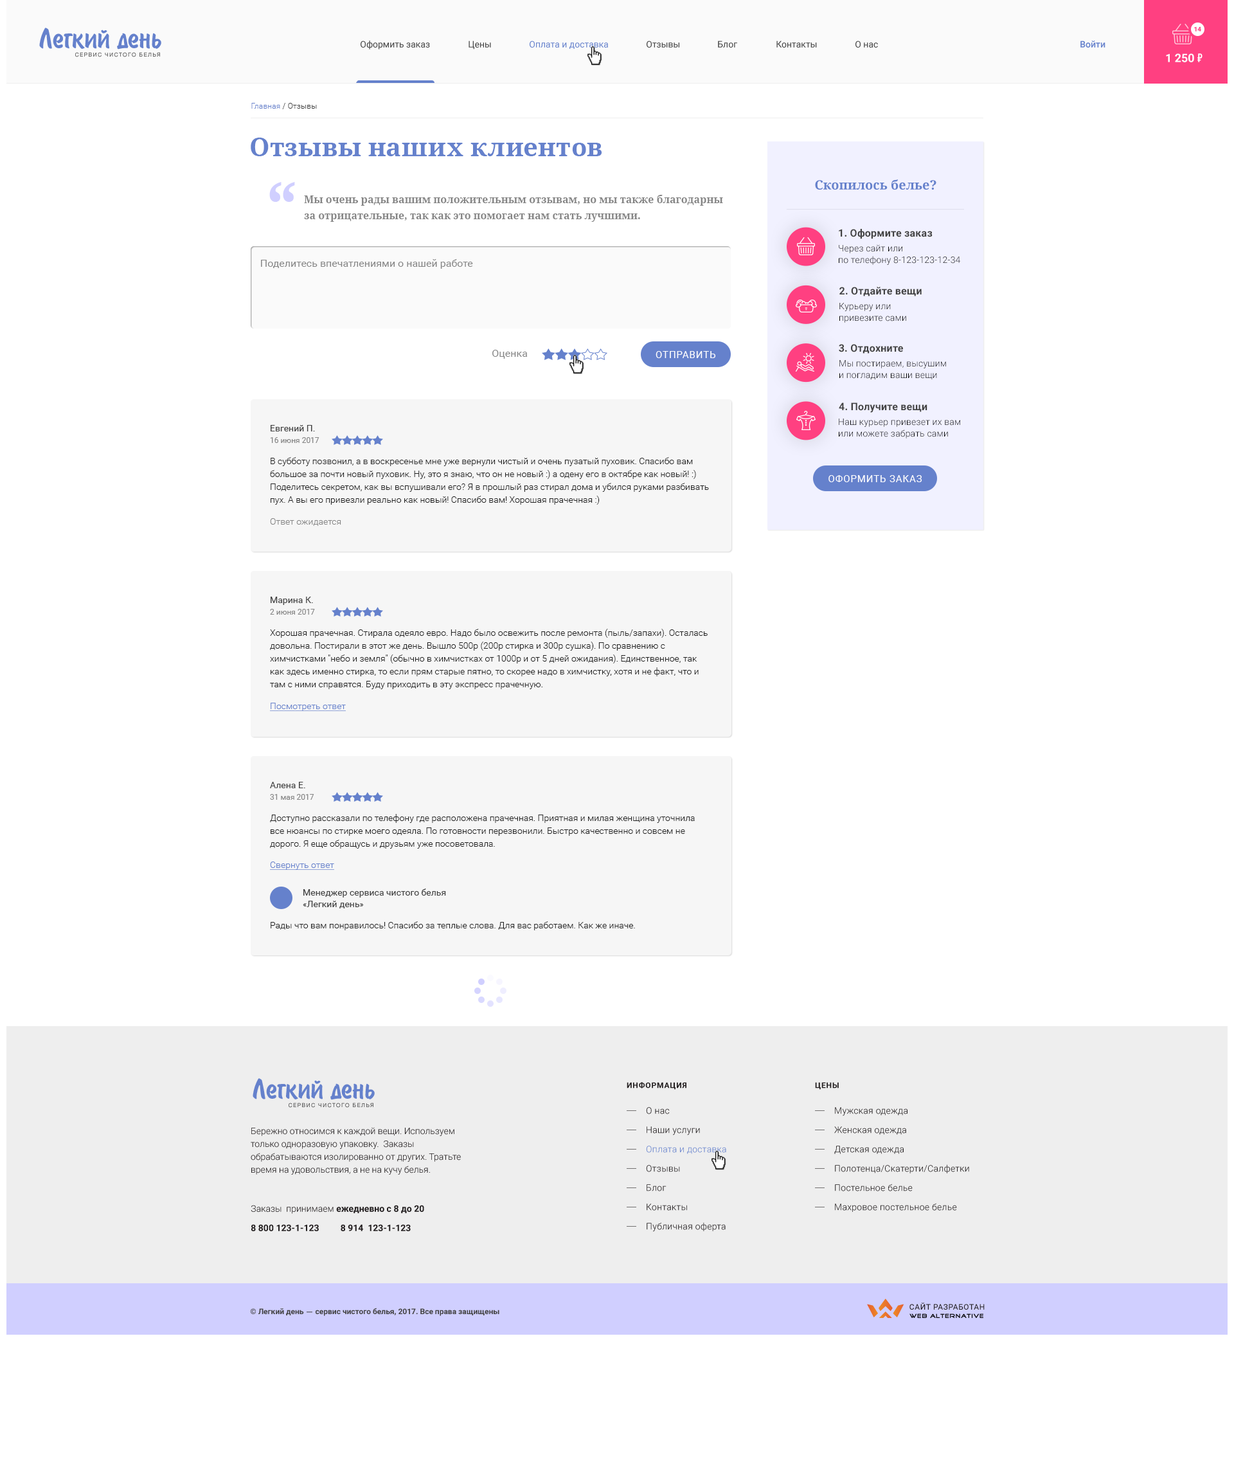
<style>
.page{position:relative;width:1234px;height:1471px;background:#ffffff}
.page>*{position:absolute;margin:0}
.t1{font:7.7px "Roboto-Light";letter-spacing:0.015em;color:#424242}
.t2{font:7.7px "Roboto-Light";letter-spacing:0.015em;color:#6581cc}
.t3{font:25.7px "NotoSerif-Bold";color:#6581cc}
.t4{font:64.3px "NotoSerif-Bold";color:#d0cfff}
.t5{font:12.9px "NotoSerif-Bold";color:#6581cc}
.t6{font:10.3px/16.1px "NotoSerif-Bold";color:#858585}
.t7{font:10.3px "Roboto-Bold";letter-spacing:0.015em;color:#424242}
.t8{font:9px/11.6px "Roboto-Light";letter-spacing:0.015em;color:#000000}
.t9{font:10.3px "Roboto-Regular";color:#858585}
.t10{font:9.6px "Roboto-Regular";letter-spacing:0.06em;color:#ffffff;text-transform:uppercase}
.t11{font:7.7px/11.6px "Roboto-Regular";color:#858585}
.t12{font:9px/11.6px "Roboto-Regular";color:#424242}
.t13{font:9px/12.9px "Roboto-Light";color:#212121}
.t14{font:9px "Roboto-Light";color:#858585}
.t15{font:9px "Roboto-Light";color:#6581cc;text-decoration:underline}
.t16{font:9px "Roboto-Light";color:#212121}
</style>
<div class="page">
<p class="t1" style="left:251px;top:103px;width:66px;height:6px"><span class="t2">Главная</span> / Отзывы</p>
<p class="t3" style="left:251px;top:138px;width:351px;height:18px">Отзывы наших клиентов</p>
<p class="t4" style="left:269px;top:182px;width:26px;height:20px">“</p>
<p class="t5" style="left:815px;top:179px;width:122px;height:11px">Скопилось белье?</p>
<p class="t6" style="left:304px;top:195px;width:419px;height:27px">Мы очень рады вашим положительным отзывам, но мы также благодарны за отрицательные, так как это помогает нам стать лучшими.</p>
<p class="t7" style="left:839px;top:229px;width:94px;height:10px">1. Оформите заказ</p>
<p class="t8" style="left:839px;top:244px;width:121px;height:21px">Через сайт или <br>по телефону 8-123-123-12-34</p>
<p class="t9" style="left:261px;top:259px;width:212px;height:10px">Поделитесь впечатлениями о нашей работе</p>
<p class="t7" style="left:840px;top:287px;width:82px;height:9px">2. Отдайте вещи</p>
<p class="t8" style="left:840px;top:303px;width:66px;height:20px">Курьеру или <br>привезите сами</p>
<p class="t9" style="left:492px;top:350px;width:36px;height:9px">Оценка</p>
<p class="t10" style="left:656px;top:351px;width:60px;height:7px">Отправить</p>
<p class="t7" style="left:839px;top:344px;width:64px;height:10px">3. Отдохните</p>
<p class="t8" style="left:840px;top:360px;width:106px;height:20px">Мы постираем, высушим<br>и погладим ваши вещи</p>
<p class="t7" style="left:839px;top:402px;width:89px;height:11px">4. Получите вещи</p>
<p class="t11" style="left:270px;top:425px;width:50px;height:18px"><span class="t12">Евгений П.<br></span>16 июня 2017</p>
<p class="t8" style="left:839px;top:419px;width:121px;height:19px">Наш курьер привезет их вам<br>или можете забрать сами</p>
<p class="t13" style="left:270px;top:457px;width:439px;height:48px">В субботу позвонил, а в воскресенье мне уже вернули чистый и очень пузатый пуховик. Спасибо вам большое за почти новый пуховик. Ну, это я знаю, что он не новый :) а одену его в октябре как новый! :) Поделитесь секретом, как вы вспушивали его? Я в прошлый раз стирал дома и убился руками разбивать пух. А вы его привезли реально как новый! Спасибо вам! Хорошая прачечная :)</p>
<p class="t10" style="left:829px;top:475px;width:94px;height:7px">Оформить заказ</p>
<p class="t14" style="left:270px;top:518px;width:71px;height:8px">Ответ ожидается</p>
<p class="t11" style="left:270px;top:597px;width:45px;height:18px"><span class="t12">Марина К.<br></span>2 июня 2017</p>
<p class="t13" style="left:270px;top:629px;width:438px;height:60px">Хорошая прачечная. Стирала одеяло евро. Надо было освежить после ремонта (пыль/запахи). Осталась довольна. Постирали в этот же день. Вышло 500р (200р стирка и 300р сушка). По сравнению с химчистками "небо и земля" (обычно в химчистках от 1000р и от 5 дней ожидания). Единственное, так как здесь именно стирка, то если прям старые пятно, то скорее надо в химчистку, хотя и не факт, что и там с ними справятся. Буду приходить в эту экспресс прачечную.</p>
<p class="t15" style="left:270px;top:703px;width:76px;height:8px">Посмотреть ответ</p>
<p class="t11" style="left:270px;top:782px;width:44px;height:18px"><span class="t12">Алена Е.<br></span>31 мая 2017</p>
<p class="t13" style="left:270px;top:814px;width:425px;height:35px">Доступно рассказали по телефону где расположена прачечная. Приятная и милая женщина уточнила все нюансы по стирке моего одеяла. По готовности перезвонили. Быстро качественно и совсем не дорого. Я еще обращусь и друзьям уже посоветовала.</p>
<p class="t15" style="left:270px;top:861px;width:64px;height:9px">Свернуть ответ</p>
<p class="t12" style="left:303px;top:888px;width:143px;height:20px">Менеджер сервиса чистого белья<br>«Легкий день»</p>
<p class="t16" style="left:271px;top:921px;width:364px;height:9px">Рады что вам понравилось! Спасибо за теплые слова. Для вас работаем. Как же иначе.</p>
</div>
